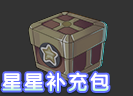
<style>
.page{position:relative;width:133px;height:96px;background:#333333}
.page>*{position:absolute;margin:0}
.t1{font:20px "FZY4JW--GB1-0";letter-spacing:0.1em;color:#ffffff}
</style>
<div class="page">
<p class="t1" style="left:2px;top:72px;width:107px;height:20px">星星补充包</p>
</div>
